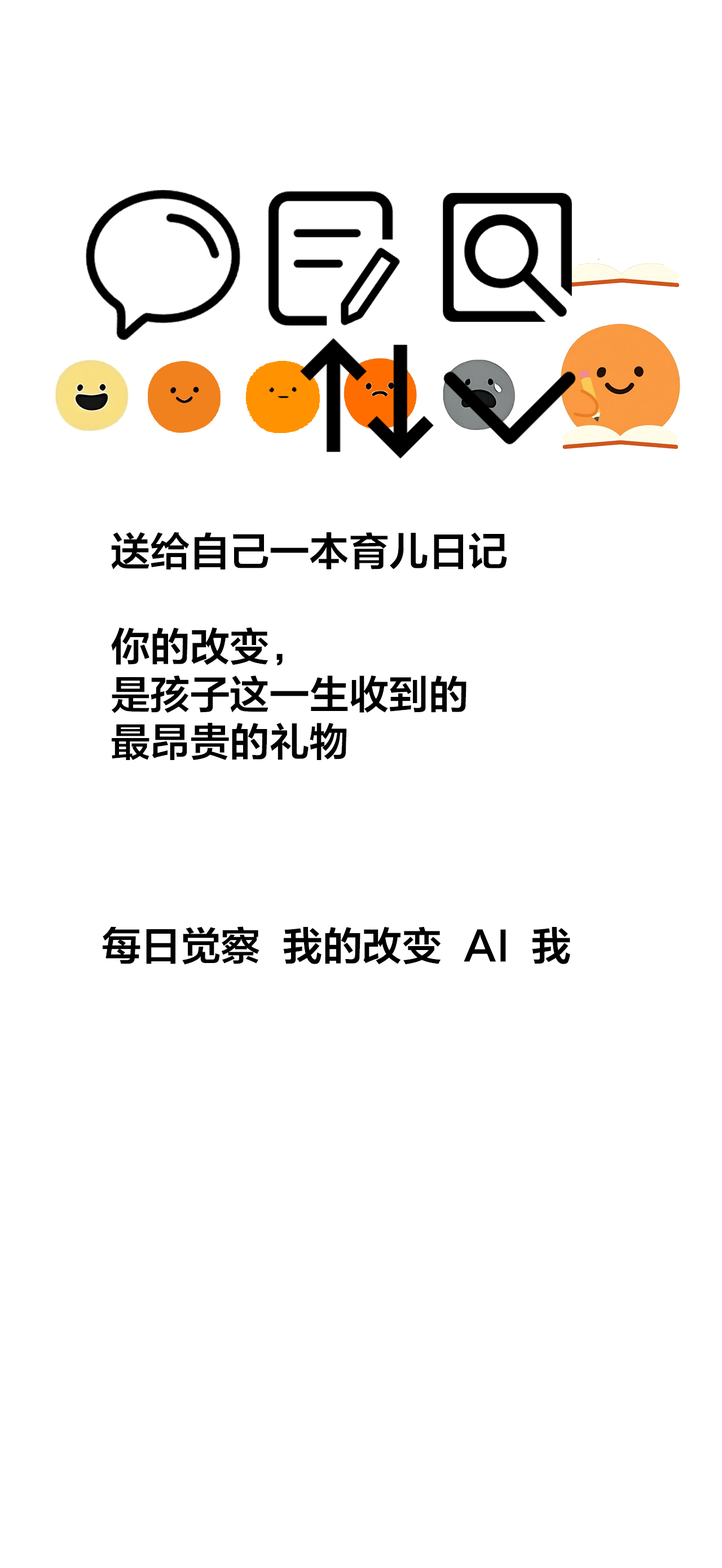
<style>
.page{position:relative;width:722px;height:1568px;background:#ffffff}
.page>*{position:absolute;margin:0}
.t1{font:39.7px "FZLTZCHK--GBK1-0";color:#000000}
</style>
<div class="page">
<p class="t1" style="left:111px;top:532px;width:396px;height:228px">送给自己一本育儿日记<br><br>你的改变，<br>是孩子这一生收到的<br>最昂贵的礼物</p>
<p class="t1" style="left:103px;top:926px;width:467px;height:39px">每日觉察  我的改变  AI  我</p>
</div>
